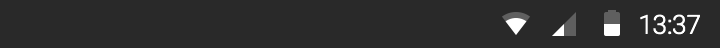
<style>
.page{position:relative;width:720px;height:48px;background:#292929}
.page>*{position:absolute;margin:0}
.t1{font:26.1px "Roboto-Light";color:#ffffff}
</style>
<div class="page">
<p class="t1" style="left:640px;top:14px;width:60px;height:21px">13:37</p>
</div>
